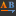
<style>
.page{position:relative;width:16px;height:16px;background:#333333}
.page>*{position:absolute;margin:0}
.t1{font:9px "Times-Bold";color:#ff6e02}
.t2{font:9px "Times-Bold";color:#5d89bb}
</style>
<div class="page">
<p class="t1" style="left:0px;top:1px;width:7px;height:7px">A</p>
<p class="t2" style="left:8px;top:1px;width:7px;height:7px">B</p>
</div>
